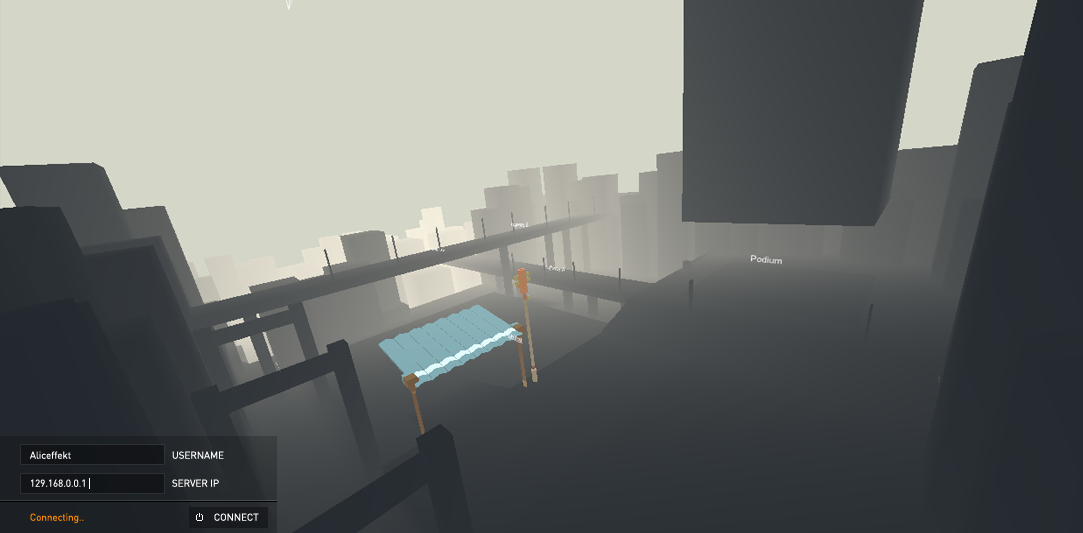
<style>
.page{position:relative;width:1083px;height:533px;background:#d4d7c8}
.page>*{position:absolute;margin:0}
.t1{font:10px "DIN";letter-spacing:-0.01em;color:#ffffff}
.t2{font:10px "DIN";letter-spacing:-0.01em;color:#ff8a00}
</style>
<div class="page">
<p class="t1" style="left:29px;top:451px;width:42px;height:8px">Aliceffekt</p>
<p class="t1" style="left:172px;top:451px;width:52px;height:8px">USERNAME</p>
<p class="t1" style="left:31px;top:479px;width:54px;height:8px">129.168.0.0.1</p>
<p class="t1" style="left:172px;top:479px;width:47px;height:8px">SERVER IP</p>
<p class="t2" style="left:30px;top:513px;width:54px;height:11px">Connecting..</p>
<p class="t1" style="left:214px;top:513px;width:45px;height:8px">CONNECT</p>
</div>
